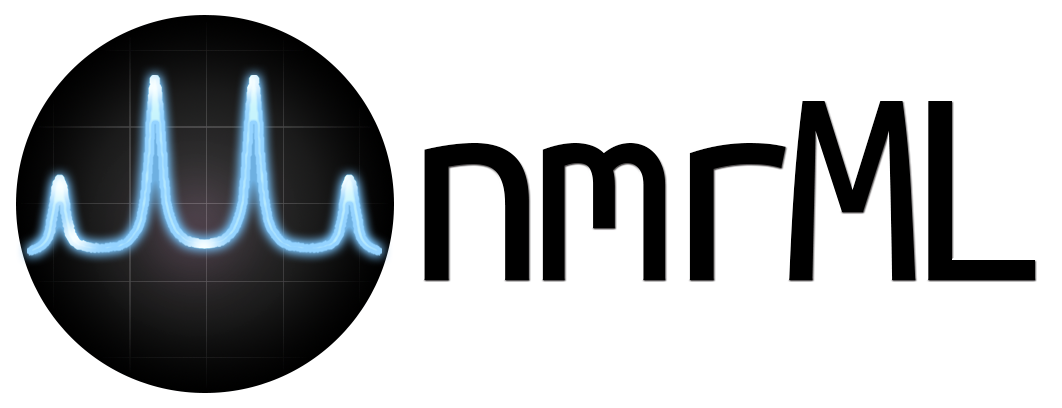
<style>
.page{position:relative;width:1062px;height:408px;background:#ffffff}
.page>*{position:absolute;margin:0}
.t1{font:289.4px "UbuntuMono-Regular";color:#000000}
</style>
<div class="page">
<p class="t1" style="left:424px;top:101px;width:611px;height:179px">nmrML</p>
</div>
